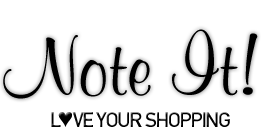
<style>
.page{position:relative;width:263px;height:132px;background:#ffffff}
.page>*{position:absolute;margin:0}
.t1{font:83.3px "MurrayHillBT-Bold";color:#000000}
.t2{font:20.8px "DinC";letter-spacing:-0.08em;color:#000000}
.t3{font:25px "Arial-BoldMT";letter-spacing:-0.08em;color:#000000}
</style>
<div class="page">
<p class="t1" style="left:3px;top:29px;width:255px;height:70px">Note It!</p>
<p class="t2" style="left:51px;top:112px;width:179px;height:15px">L<span class="t3">♥</span>VE YOUR SHOPPING</p>
</div>
